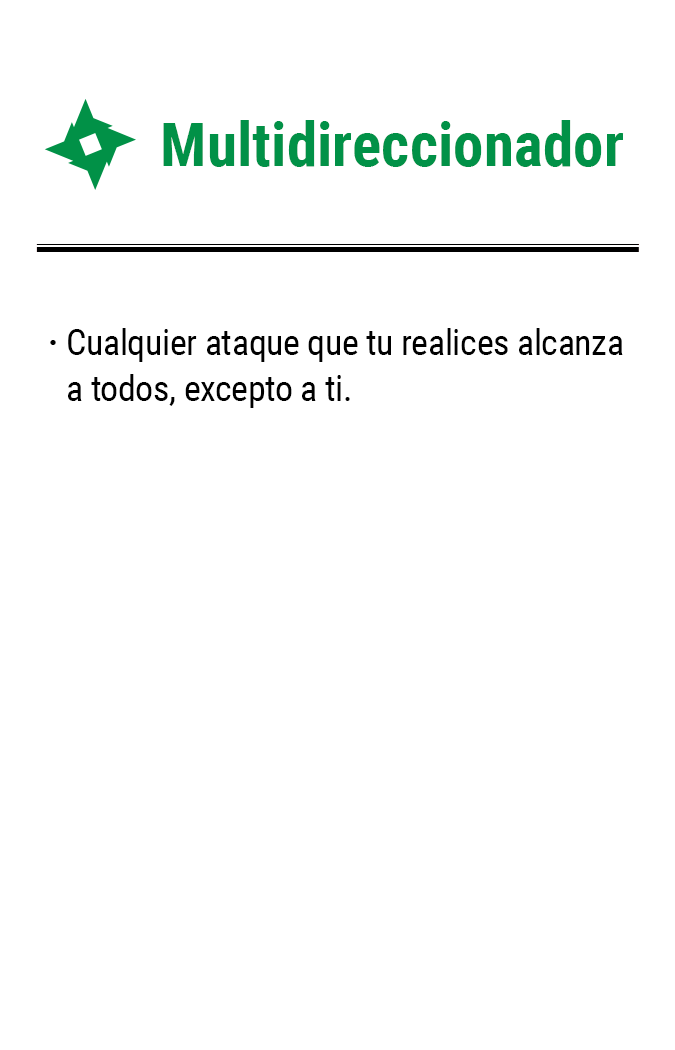
<style>
.page{position:relative;width:675px;height:1050px;background:#ffffff}
.page>*{position:absolute;margin:0}
.t1{font:61.2px "RobotoCondensed-Bold";color:#019147}
.t2{font:35.8px/45.8px "RobotoCondensed-Regular";letter-spacing:-0.01em;color:#000000}
.t3{font:35.8px "RobotoCondensed-Bold";letter-spacing:-0.01em;color:#000000}
</style>
<div class="page">
<p class="t1" style="left:163px;top:120px;width:461px;height:47px">Multidireccionador</p>
<p class="t2" style="left:68px;top:328px;width:555px;height:80px">Cualquier ataque que tu realices alcanza a todos, excepto a ti.</p>
<p class="t3" style="left:50px;top:340px;width:6px;height:5px">·</p>
</div>
